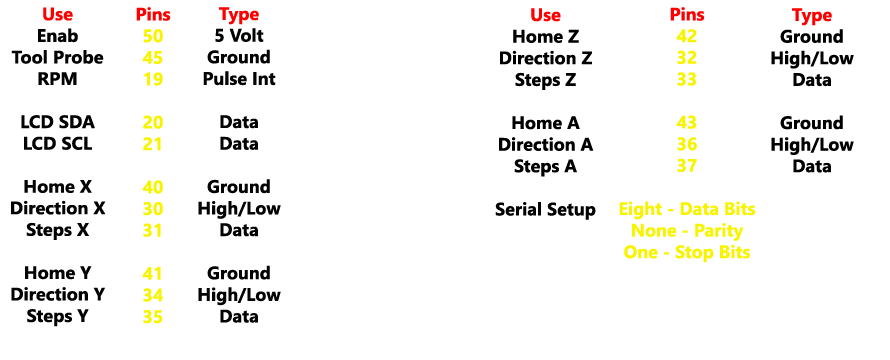
<style>
.page{position:relative;width:890px;height:360px;background:#ffffff}
.page>*{position:absolute;margin:0}
.t1{font:18px "SegoeUI-Bold";color:#020202}
.t2{font:18px "SegoeUI-Bold";color:#ff0000}
.t3{font:18px "SegoeUI-Bold";color:#f8f400}
.t4{font:18px "SegoeUI-Bold";color:#030303}
.t5{font:18px "SegoeUI-Bold";color:#000000}
</style>
<div class="page">
<p class="t1" style="left:11px;top:7px;width:95px;height:320px;text-align:center"><span class="t2">Use<br></span>Enab<br>Tool Probe<br>RPM<br><br>LCD SDA<br>LCD SCL<br><br>Home X<br>Direction X<br>Steps X<br><br>Home Y<br>Direction Y<br>Steps Y</p>
<p class="t3" style="left:136px;top:7px;width:35px;height:317px;text-align:center"><span class="t2">Pins<br></span>50<br>45<br>19<br><br>20<br>21<br><br>40<br>30<br>31<br><br>41<br>34<br>35</p>
<p class="t4" style="left:198px;top:7px;width:83px;height:316px;text-align:center"><span class="t2">Type<br></span>5 Volt<br>Ground<br>Pulse Int<br><br>Data<br>Data<br><br>Ground<br>High/Low<br>Data<br><br>Ground<br>High/Low<br>Data</p>
<p class="t5" style="left:495px;top:8px;width:101px;height:212px;text-align:center"><span class="t2">Use<br></span>Home Z<br>Direction Z<br>Steps Z<br><br>Home A<br>Direction A<br>Steps A<br><br>Serial Setup</p>
<p class="t3" style="left:619px;top:7px;width:137px;height:256px;text-align:center"><span class="t2">Pins<br></span>42<br>32<br>33<br><br>43<br>36<br>37<br><br>Eight - Data Bits<br>None - Parity<br>One - Stop Bits</p>
<p class="t5" style="left:771px;top:8px;width:83px;height:165px;text-align:center"><span class="t2">Type<br></span>Ground<br>High/Low<br>Data<br><br>Ground<br>High/Low<br>Data</p>
</div>
